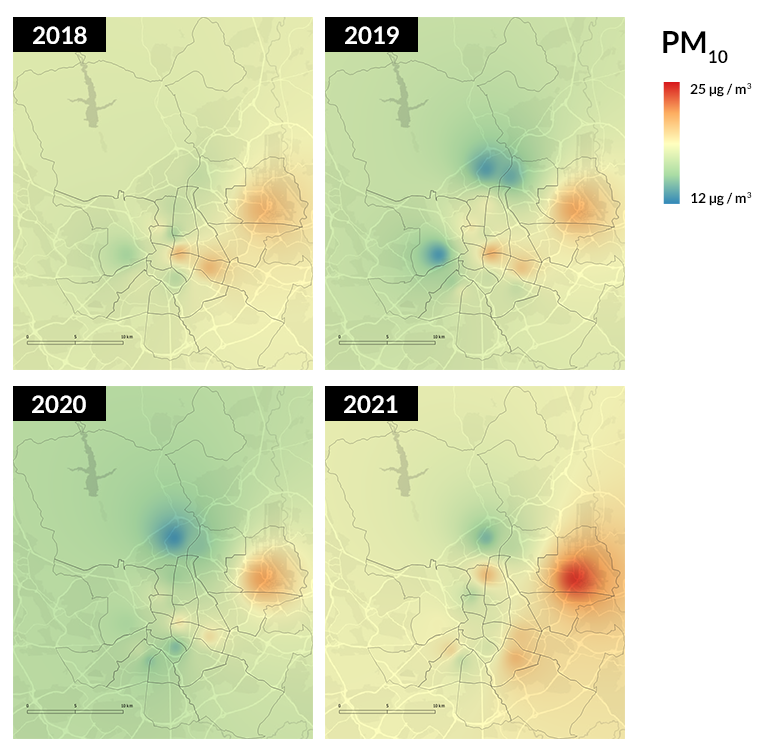
<style>
.page{position:relative;width:780px;height:750px;background:#ffffff}
.page>*{position:absolute;margin:0}
.t1{font:24px "Lato-Bold";color:#ffffff}
.t2{font:30px "Lato-Bold";color:#000000}
.t3{font:14px "Lato-Bold";color:#000000}
</style>
<div class="page">
<p class="t1" style="left:33px;top:26px;width:54px;height:18px">2018</p>
<p class="t1" style="left:345px;top:26px;width:54px;height:18px">2019</p>
<p class="t2" style="left:663px;top:31px;width:65px;height:32px">PM10</p>
<p class="t3" style="left:690px;top:83px;width:62px;height:14px">25 μg / m3</p>
<p class="t3" style="left:691px;top:192px;width:61px;height:14px">12 μg / m3</p>
<p class="t1" style="left:32px;top:395px;width:54px;height:18px">2020</p>
<p class="t1" style="left:344px;top:395px;width:54px;height:18px">2021</p>
</div>
